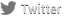
<style>
.page{position:relative;width:79px;height:16px;background:#ffffff}
.page>*{position:absolute;margin:0}
.t1{font:12px "Roboto-Regular";letter-spacing:0.04em;color:#d8d8d8}
</style>
<div class="page">
<p class="t1" style="left:21px;top:3px;width:41px;height:10px">Twitter</p>
</div>
